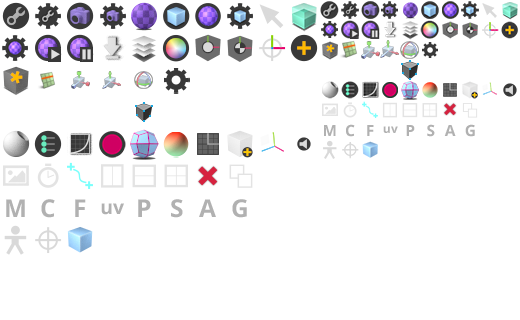
<style>
.page{position:relative;width:520px;height:320px;background:#ffffff}
.page>*{position:absolute;margin:0}
.t1{font:15.4px "OpenSans-Bold";letter-spacing:0.01em;color:#b1b1b1}
.t2{font:12.1px "OpenSans-Bold";letter-spacing:0.01em;color:#b1b1b1}
.t3{font:24.6px "OpenSans-Bold";letter-spacing:0.01em;color:#b1b1b1}
.t4{font:19.3px "OpenSans-Bold";letter-spacing:0.01em;color:#b1b1b1}
</style>
<div class="page">
<p class="t1" style="left:324px;top:125px;width:12px;height:11px">M</p>
<p class="t1" style="left:346px;top:124px;width:9px;height:13px">C</p>
<p class="t1" style="left:367px;top:125px;width:7px;height:11px">F</p>
<p class="t2" style="left:383px;top:126px;width:15px;height:7px">uv</p>
<p class="t1" style="left:406px;top:125px;width:9px;height:11px">P</p>
<p class="t1" style="left:427px;top:124px;width:8px;height:13px">S</p>
<p class="t1" style="left:444px;top:125px;width:12px;height:11px">A</p>
<p class="t1" style="left:465px;top:124px;width:10px;height:13px">G</p>
<p class="t3" style="left:6px;top:199px;width:19px;height:18px">M</p>
<p class="t3" style="left:41px;top:199px;width:14px;height:19px">C</p>
<p class="t3" style="left:75px;top:199px;width:11px;height:18px">F</p>
<p class="t4" style="left:101px;top:203px;width:23px;height:12px">uv</p>
<p class="t3" style="left:138px;top:199px;width:13px;height:18px">P</p>
<p class="t3" style="left:171px;top:199px;width:12px;height:19px">S</p>
<p class="t3" style="left:199px;top:199px;width:17px;height:18px">A</p>
<p class="t3" style="left:232px;top:199px;width:15px;height:19px">G</p>
</div>
